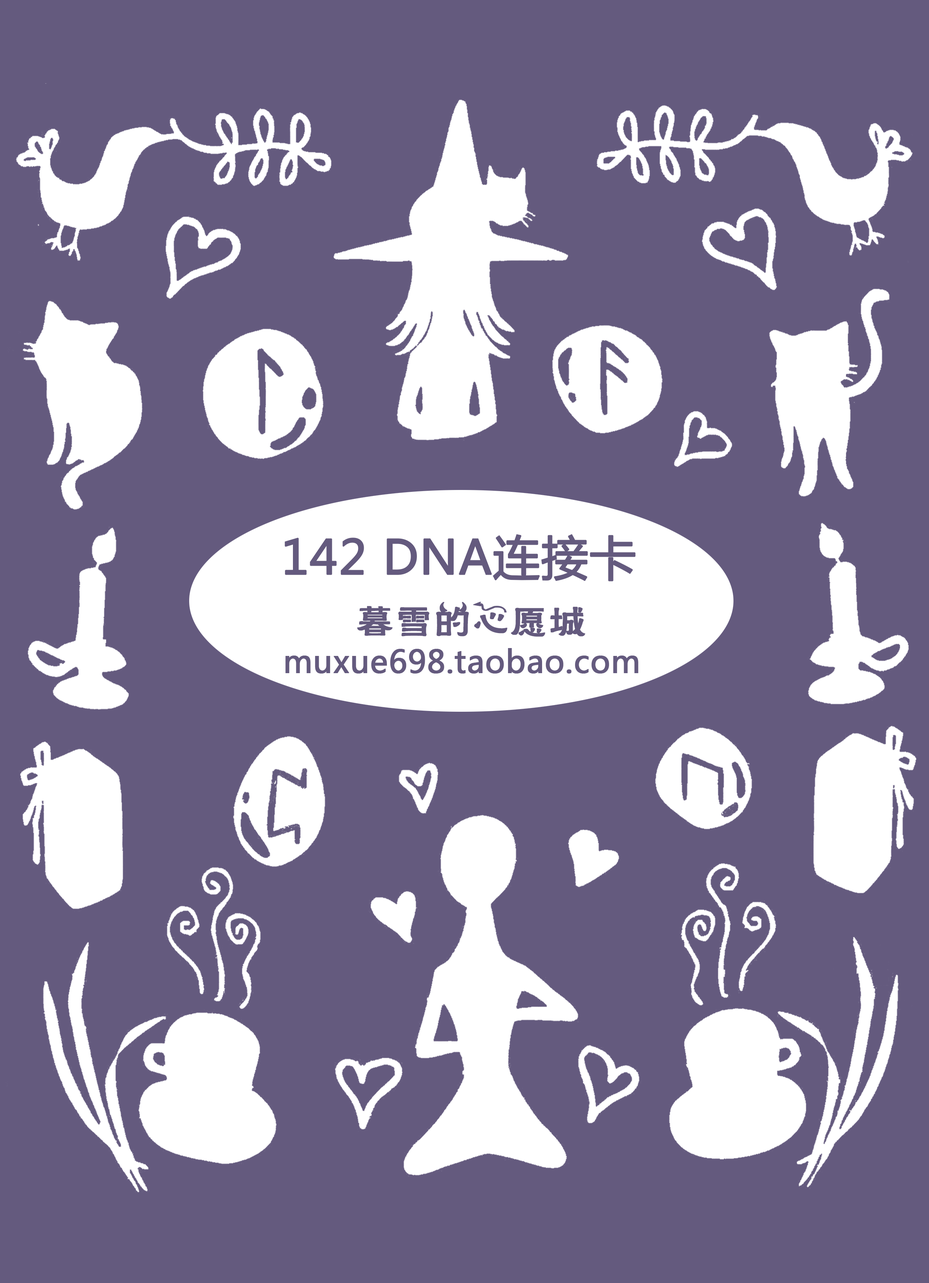
<style>
.page{position:relative;width:929px;height:1283px;background:#645a7e}
.page>*{position:absolute;margin:0}
.t1{font:46.8px "MicrosoftYaHei";color:#645a7e;font-weight:bold}
.t2{font:37.5px "FZHLJW--GB1-0";color:#645a7e;font-weight:bold}
.t3{font:31.2px "MicrosoftYaHei";color:#645a7e;font-weight:bold}
</style>
<div class="page">
<p class="t1" style="left:285px;top:534px;width:351px;height:48px">142 DNA连接卡</p>
<p class="t2" style="left:357px;top:602px;width:229px;height:35px">暮雪的心愿城</p>
<p class="t3" style="left:286px;top:648px;width:352px;height:26px">muxue698.taobao.com</p>
</div>
